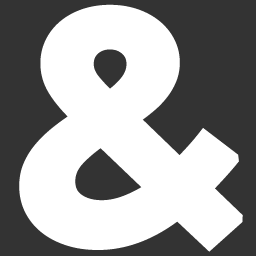
<style>
.page{position:relative;width:256px;height:256px;background:#ffffff}
.page>*{position:absolute;margin:0}
.t1{font:324.6px "BreezeSans-Bold";color:#ffffff;font-weight:bold;scale:1.05 1}
</style>
<div class="page">
<p class="t1" style="left:19px;top:4px;width:224px;height:248px">&amp;</p>
</div>
